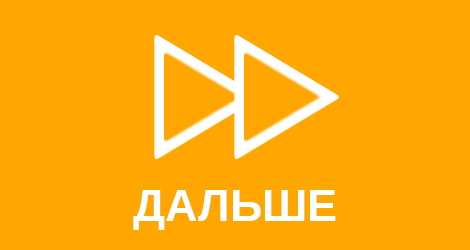
<style>
.page{position:relative;width:470px;height:250px;background:#ffa700}
.page>*{position:absolute;margin:0}
.t1{font:45px "LiberationSans-Bold";color:#ffffff;text-transform:uppercase}
</style>
<div class="page">
<p class="t1" style="left:133px;top:190px;width:203px;height:40px">дальше</p>
</div>
